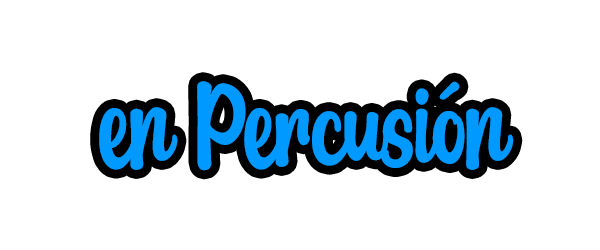
<style>
.page{position:relative;width:600px;height:250px;background:#ffffff}
.page>*{position:absolute;margin:0}
.t1{font:126.3px "MangoDrink-Regular";color:#0099ff}
</style>
<div class="page">
<p class="t1" style="left:99px;top:81px;width:415px;height:90px">en Percusión</p>
</div>
